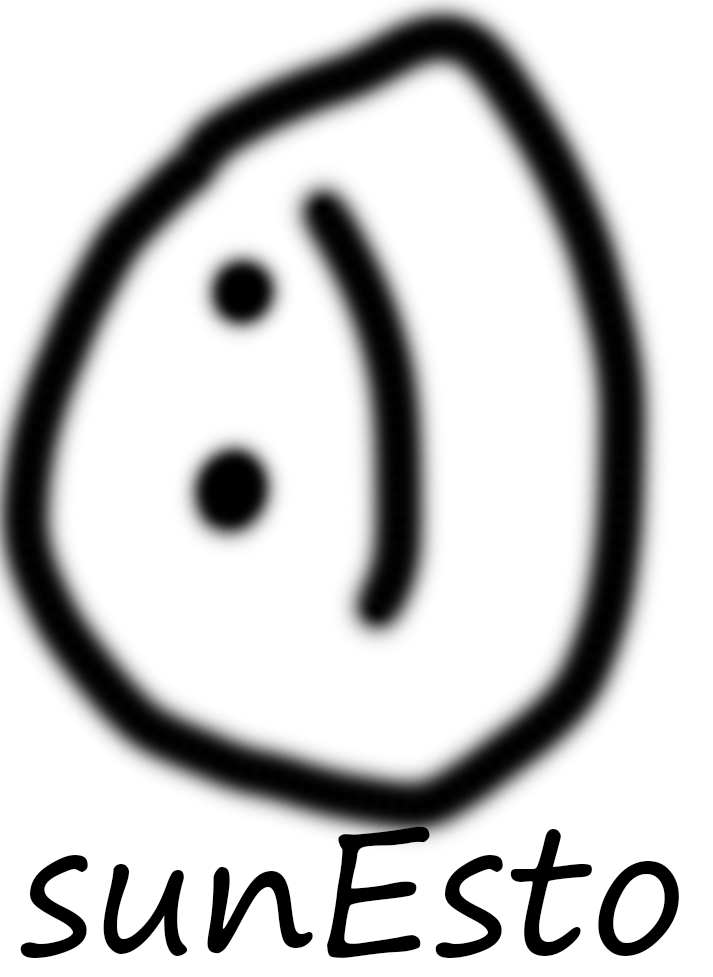
<style>
.page{position:relative;width:713px;height:977px;background:#ffffff}
.page>*{position:absolute;margin:0}
.t1{font:174.1px "SegoePrint";color:#000000}
</style>
<div class="page">
<p class="t1" style="left:20px;top:826px;width:659px;height:132px">sunEsto</p>
</div>
